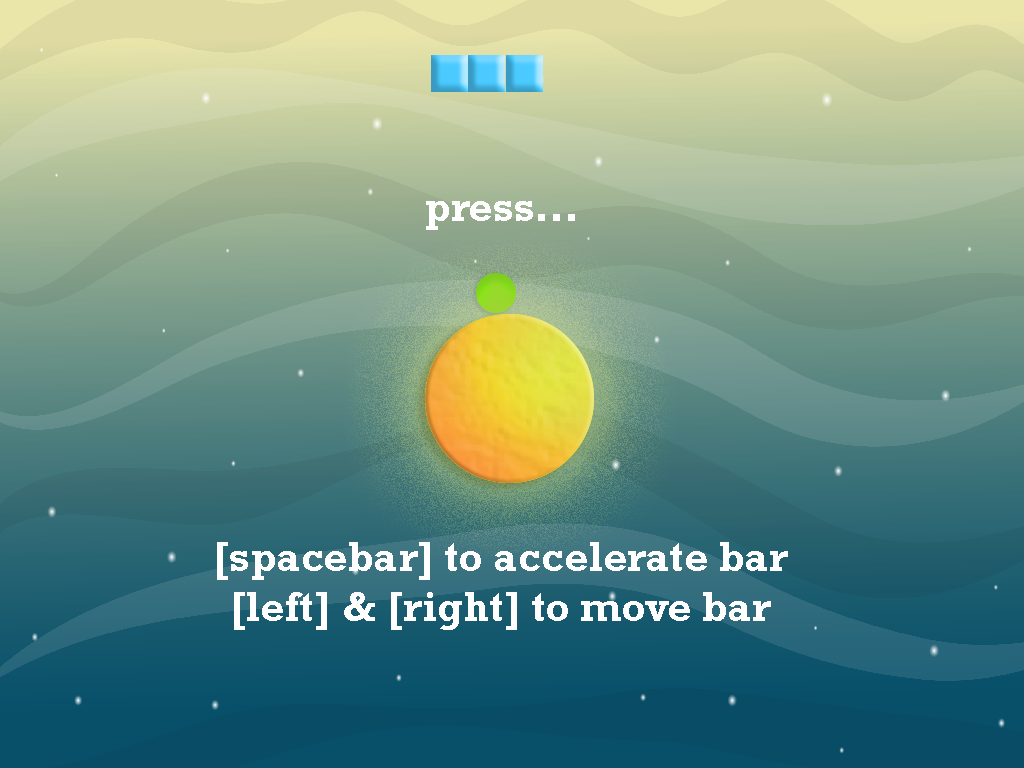
<style>
.page{position:relative;width:1024px;height:768px}
.page>*{position:absolute;margin:0}
.t1{font:41.7px "Rockwell-Bold";color:#ffffff}
</style>
<div class="page">
<p class="t1" style="left:217px;top:201px;width:571px;height:429px;text-align:center">press...<br><br><br><br><br><br><br>[spacebar] to accelerate bar<br>[left] &amp; [right] to move bar</p>
</div>
